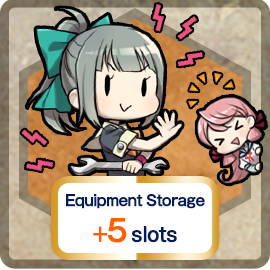
<style>
.page{position:relative;width:270px;height:270px}
.page>*{position:absolute;margin:0}
.t1{font:15px "GothicMB101Pro-Medium";letter-spacing:-0.04em;color:#001d59;font-weight:bold;scale:0.9 1}
.t2{font:20px "GothicMB101Pro-Medium";letter-spacing:-0.04em;color:#ff6000;font-weight:bold;scale:0.9 1}
.t3{font:30px "GothicMB101Pro-Medium";letter-spacing:-0.04em;color:#ff6000;font-weight:bold;scale:0.9 1}
.t4{font:20px "GothicMB101Pro-Medium";letter-spacing:-0.04em;color:#001d59;font-weight:bold;scale:0.9 1}
</style>
<div class="page">
<p class="t1" style="left:66px;top:194px;width:139px;height:49px;text-align:center">Equipment Storage<br><span class="t2">+</span><span class="t3">5 </span><span class="t4">slots</span></p>
</div>
